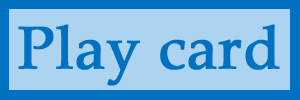
<style>
.page{position:relative;width:300px;height:100px;background:#acd3ef}
.page>*{position:absolute;margin:0}
.t1{font:60px "PalatinoLinotype-Roman";color:#0070c0;font-weight:bold}
</style>
<div class="page">
<p class="t1" style="left:18px;top:24px;width:262px;height:62px">Play card</p>
</div>
